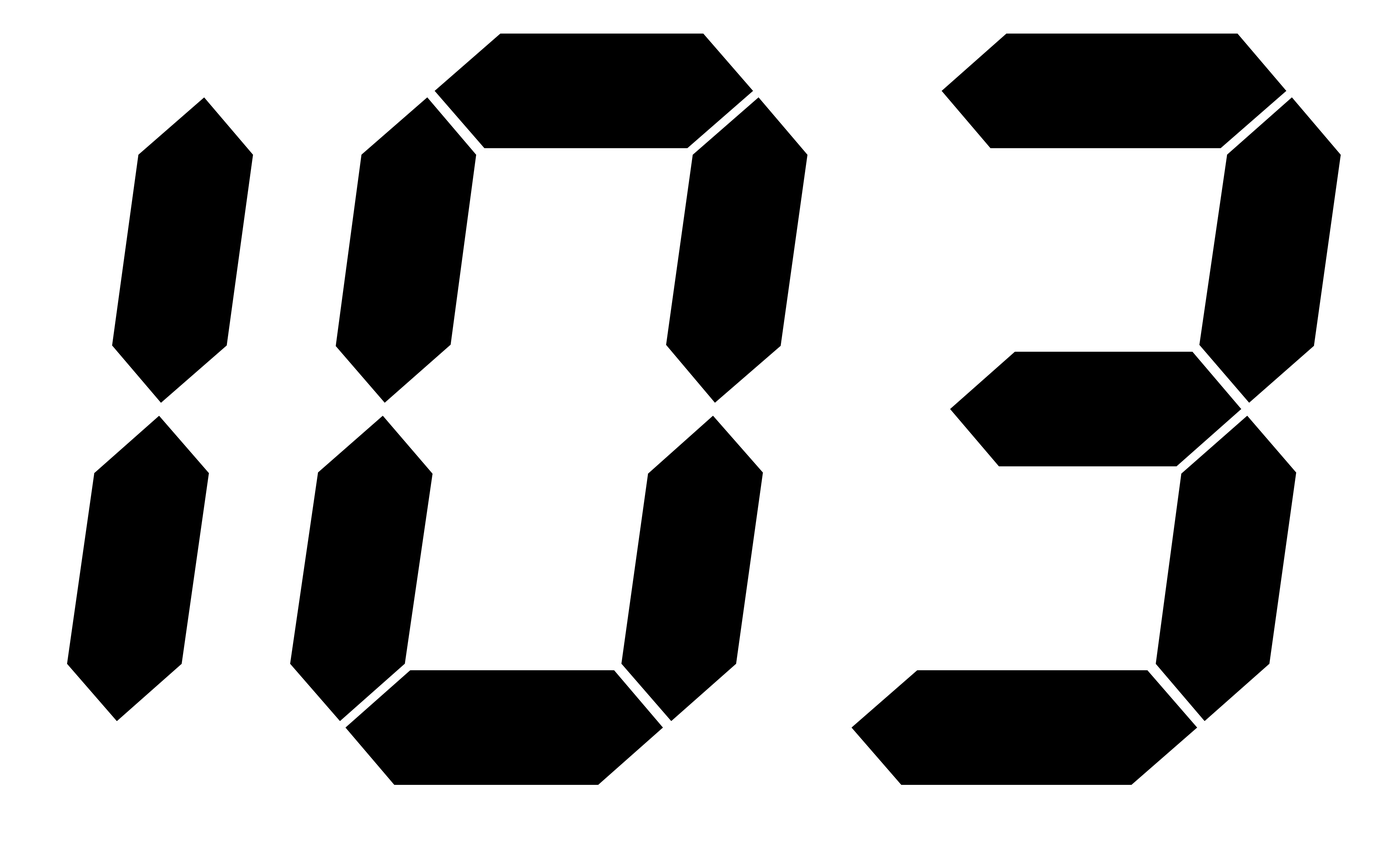
<style>
.page{position:relative;width:1392px;height:857px;background:#ffffff}
.page>*{position:absolute;margin:0}
.t1{font:938.7px "MouseLEDU";letter-spacing:0.05em;color:#000000}
</style>
<div class="page">
<p class="t1" style="left:67px;top:34px;width:1274px;height:751px">103</p>
</div>
